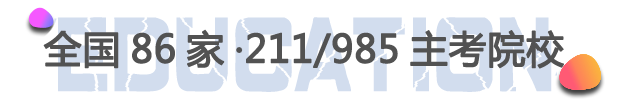
<style>
.page{position:relative;width:640px;height:100px;background:#ffffff}
.page>*{position:absolute;margin:0}
.t1{font:38px "MicrosoftYaHei";color:#525252;font-weight:bold}
</style>
<div class="page">
<p class="t1" style="left:43px;top:29px;width:521px;height:40px">全国86家·211/985主考院校</p>
</div>
